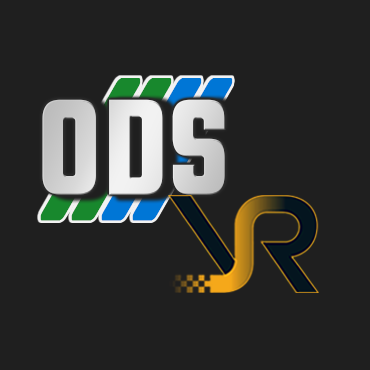
<style>
.page{position:relative;width:370px;height:370px;background:#1f1f1f}
.page>*{position:absolute;margin:0}
.t1{font:147.6px "Teko-Bold";letter-spacing:0.01em;font-weight:bold;scale:0.83 1}
</style>
<div class="page">
<p class="t1" style="left:42px;top:99px;width:184px;height:96px">ODS</p>
</div>
